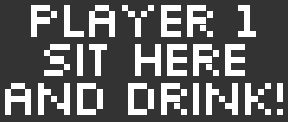
<style>
.page{position:relative;width:288px;height:122px;background:#333333}
.page>*{position:absolute;margin:0}
.t1{font:54px/39px "Silkscreen";letter-spacing:-0.12em;color:#ffffff}
</style>
<div class="page">
<p class="t1" style="left:5px;top:5px;width:278px;height:110px;text-align:center">Player 1<br>sit here<br>and drink!</p>
</div>
